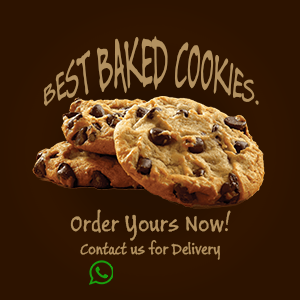
<style>
.page{position:relative;width:300px;height:300px;background:#2d1300}
.page>*{position:absolute;margin:0}
.t1{font:25px "BuxtonSketch";color:#b39160}
.t2{font:16.9px "BuxtonSketch";color:#b39160}
</style>
<div class="page">
<p class="t1" style="left:43px;top:36px;width:216px;height:70px">BEST BAKED COOKIES.</p>
<p class="t1" style="left:70px;top:209px;width:161px;height:32px">Order Yours Now!</p>
<p class="t2" style="left:80px;top:240px;width:140px;height:20px">Contact us for Delivery</p>
</div>
